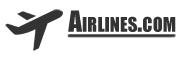
<style>
.page{position:relative;width:180px;height:58px;background:#ffffff}
.page>*{position:absolute;margin:0}
.t1{font:26.7px "Impact";color:#333333;font-variant:small-caps}
</style>
<div class="page">
<p class="t1" style="left:68px;top:10px;width:108px;height:22px">Airlines.com</p>
</div>
